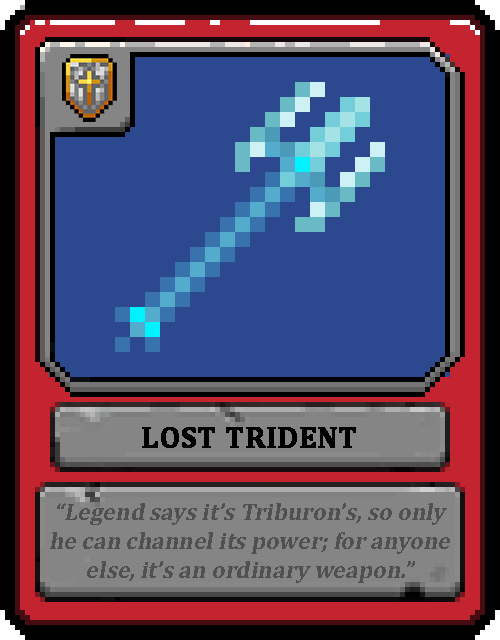
<style>
.page{position:relative;width:500px;height:640px;background:#2c488f}
.page>*{position:absolute;margin:0}
.t1{font:30px "Cambria-Bold";color:#000000;text-transform:uppercase;font-weight:bold}
.t2{font:24px "Cambria-Bold";color:#505050;font-style:italic}
</style>
<div class="page">
<p class="t1" style="left:142px;top:427px;width:214px;height:21px">Lost Trident</p>
<p class="t2" style="left:50px;top:503px;width:400px;height:80px;text-align:center">“Legend says it’s Triburon’s, so only he can channel its power; for anyone else, it’s an ordinary weapon.”</p>
</div>
